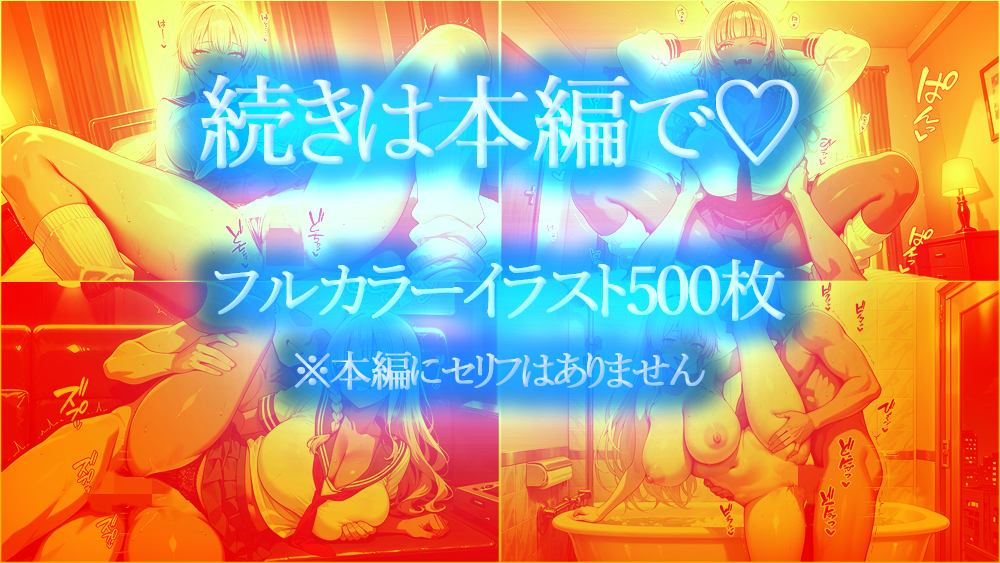
<style>
.page{position:relative;width:1000px;height:563px}
.page>*{position:absolute;margin:0}
.t1{font:100px "YuMinPr6N-Regular";font-weight:bold}
.t2{font:66.7px "YuMinPr6N-Regular";font-weight:bold}
.t3{font:41.7px "YuMinPr6N-Regular";font-weight:bold}
</style>
<div class="page">
<p class="t1" style="left:200px;top:75px;width:599px;height:94px">続きは本編で♡</p>
<p class="t1" style="left:200px;top:75px;width:599px;height:94px">続きは本編で♡</p>
<p class="t2" style="left:214px;top:259px;width:571px;height:62px">フルカラーイラスト500枚</p>
<p class="t2" style="left:214px;top:259px;width:571px;height:62px">フルカラーイラスト500枚</p>
<p class="t3" style="left:295px;top:351px;width:410px;height:39px">※本編にセリフはありません</p>
<p class="t3" style="left:295px;top:351px;width:410px;height:39px">※本編にセリフはありません</p>
</div>
